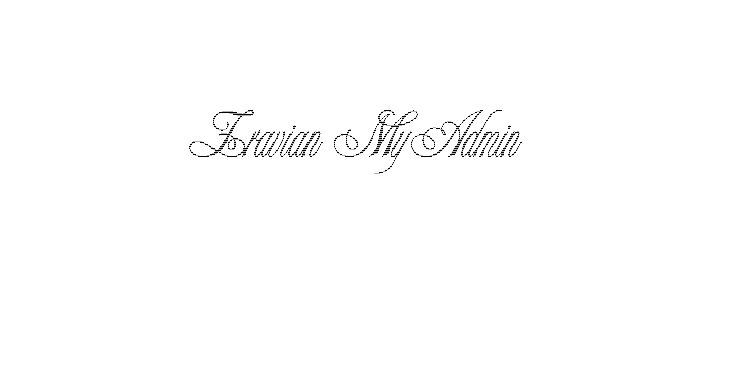
<style>
.page{position:relative;width:750px;height:375px;background:#ffffff}
.page>*{position:absolute;margin:0}
.t1{font:60px "Champagne"}
</style>
<div class="page">
<p class="t1" style="left:189px;top:110px;width:333px;height:64px">Zravian MyAdmin</p>
</div>
